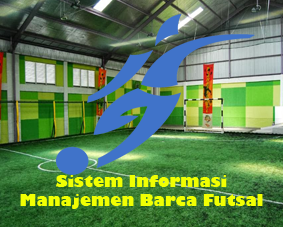
<style>
.page{position:relative;width:283px;height:227px}
.page>*{position:absolute;margin:0}
.t1{font:16px "GillSans-UltraBold";color:#f0ff03}
</style>
<div class="page">
<p class="t1" style="left:20px;top:175px;width:243px;height:34px;text-align:center">Sistem Informasi Manajemen Barca Futsal</p>
</div>
